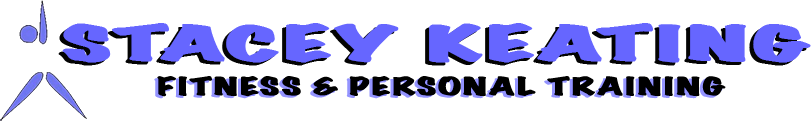
<style>
.page{position:relative;width:811px;height:121px;background:#ffffff}
.page>*{position:absolute;margin:0}
.t1{font:43.8px "MarkerFelt-Wide";color:#6666ff;font-weight:bold;scale:2.19 1}
.t2{font:22.2px "MarkerFelt-Wide";color:#000000;font-weight:bold;scale:1.74 1}
</style>
<div class="page">
<p class="t1" style="left:62px;top:23px;width:749px;height:40px">STACEY KEATING</p>
<p class="t2" style="left:157px;top:76px;width:569px;height:21px">FITNESS &amp; PERSONAL TRAINING</p>
</div>
